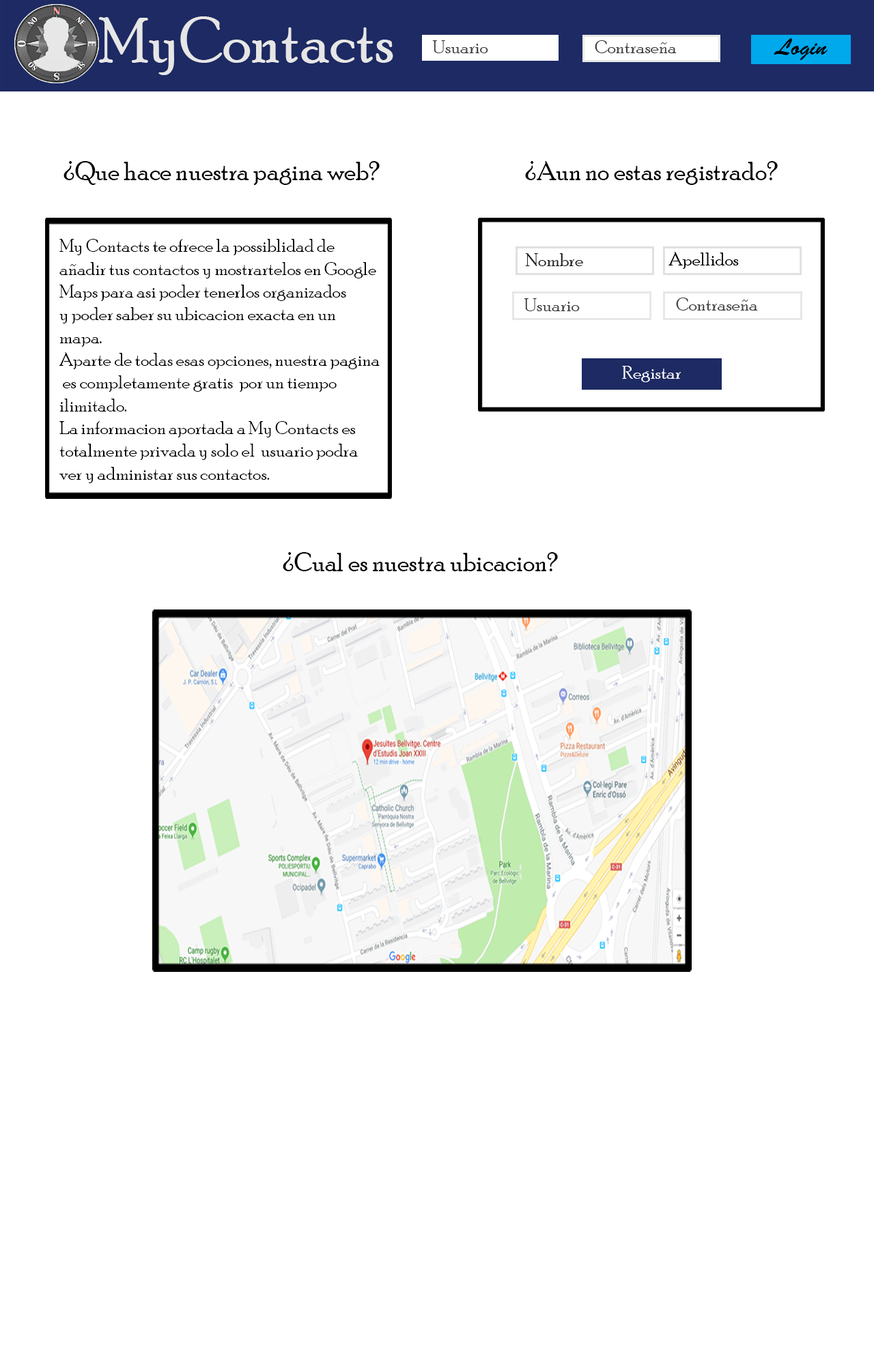
<style>
.page{position:relative;width:874px;height:1365px;background:#ffffff}
.page>*{position:absolute;margin:0}
.t1{font:64.5px "PoorRichard-Regular";color:#e6e6e6}
.t2{font:26.5px "PoorRichard-Regular";color:#000000}
.t3{font:19px "PoorRichard-Regular";color:#000000}
.t4{font:19px "PoorRichard-Regular";color:#ffffff}
</style>
<div class="page">
<p class="t1" style="left:98px;top:16px;width:295px;height:59px">MyContacts</p>
<p class="t2" style="left:63px;top:161px;width:316px;height:24px">¿Que hace nuestra pagina web?</p>
<p class="t2" style="left:525px;top:161px;width:252px;height:24px">¿Aun no estas registrado?</p>
<p class="t3" style="left:59px;top:239px;width:320px;height:244px">My Contacts te ofrece la possiblidad de <br>añadir tus contactos y mostrartelos en Google<br>Maps para asi poder tenerlos organizados <br>y poder saber su ubicacion exacta en un <br>mapa.<br>Aparte de todas esas opciones, nuestra pagina<br> es completamente gratis  por un tiempo <br>ilimitado.<br>La informacion aportada a My Contacts es <br>totalmente privada y solo el  usuario podra <br>ver y administar sus contactos.</p>
<p class="t4" style="left:622px;top:366px;width:59px;height:16px">Registar</p>
<p class="t2" style="left:283px;top:552px;width:275px;height:19px">¿Cual es nuestra ubicacion?</p>
</div>
